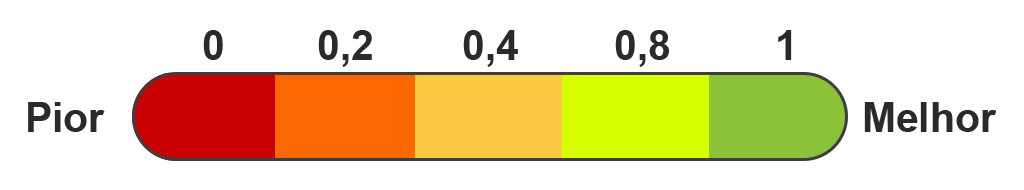
<style>
.page{position:relative;width:1024px;height:190px;background:#ffffff}
.page>*{position:absolute;margin:0}
.t1{font:40.7px "Arial-BoldMT";color:#2a2a2a}
</style>
<div class="page">
<p class="t1" style="left:203px;top:30px;width:20px;height:30px">0</p>
<p class="t1" style="left:318px;top:30px;width:54px;height:37px">0,2</p>
<p class="t1" style="left:463px;top:30px;width:55px;height:37px">0,4</p>
<p class="t1" style="left:615px;top:30px;width:54px;height:37px">0,8</p>
<p class="t1" style="left:778px;top:30px;width:14px;height:30px">1</p>
<p class="t1" style="left:28px;top:102px;width:77px;height:30px">Pior</p>
<p class="t1" style="left:864px;top:102px;width:132px;height:30px">Melhor</p>
</div>
